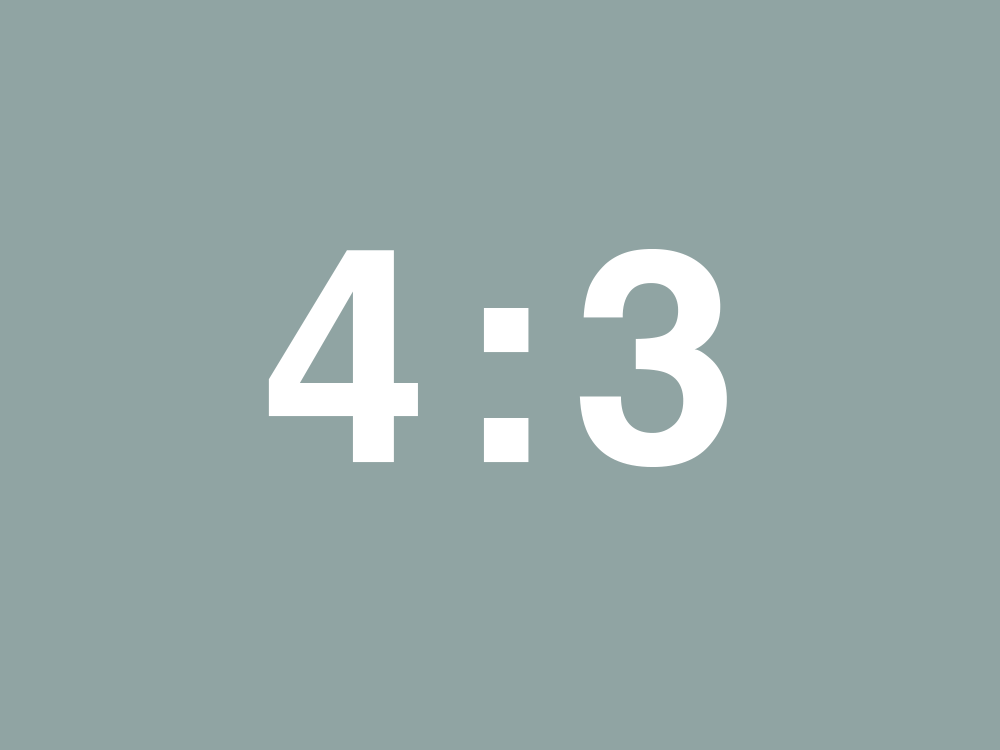
<style>
.page{position:relative;width:1000px;height:750px;background:#90a4a3}
.page>*{position:absolute;margin:0}
.t1{font:300px "Helvetica-Bold";letter-spacing:0.075em;color:#ffffff}
</style>
<div class="page">
<p class="t1" style="left:268px;top:249px;width:459px;height:218px">4:3</p>
</div>
